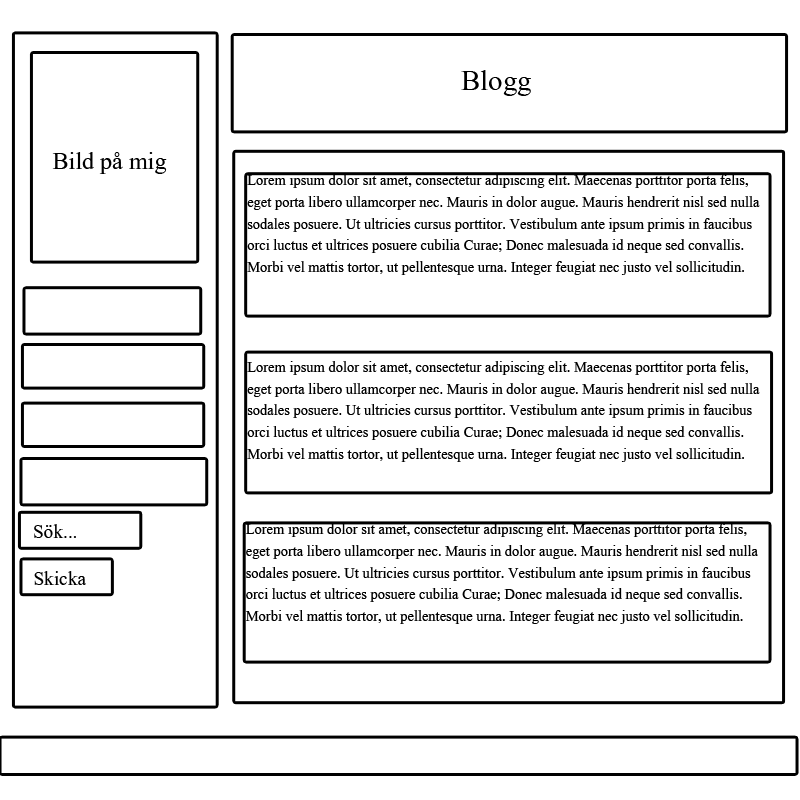
<style>
.page{position:relative;width:800px;height:800px;background:#ffffff}
.page>*{position:absolute;margin:0}
.t1{font:36px "Aparajita";color:#000000}
.t2{font:30px "Aparajita";color:#000000}
.t3{font:18px "Aparajita";color:#000000}
.t4{font:24px "Aparajita";color:#000000}
</style>
<div class="page">
<p class="t1" style="left:461px;top:70px;width:70px;height:26px">Blogg</p>
<p class="t2" style="left:52px;top:152px;width:115px;height:22px">Bild på mig</p>
<p class="t3" style="left:247px;top:174px;width:513px;height:101px">Lorem ipsum dolor sit amet, consectetur adipiscing elit. Maecenas porttitor porta felis, eget porta libero ullamcorper nec. Mauris in dolor augue. Mauris hendrerit nisl sed nulla sodales posuere. Ut ultricies cursus porttitor. Vestibulum ante ipsum primis in faucibus orci luctus et ultrices posuere cubilia Curae; Donec malesuada id neque sed convallis. Morbi vel mattis tortor, ut pellentesque urna. Integer feugiat nec justo vel sollicitudin.</p>
<p class="t3" style="left:247px;top:361px;width:513px;height:101px">Lorem ipsum dolor sit amet, consectetur adipiscing elit. Maecenas porttitor porta felis, eget porta libero ullamcorper nec. Mauris in dolor augue. Mauris hendrerit nisl sed nulla sodales posuere. Ut ultricies cursus porttitor. Vestibulum ante ipsum primis in faucibus orci luctus et ultrices posuere cubilia Curae; Donec malesuada id neque sed convallis. Morbi vel mattis tortor, ut pellentesque urna. Integer feugiat nec justo vel sollicitudin.</p>
<p class="t4" style="left:34px;top:524px;width:42px;height:14px">Sök...</p>
<p class="t3" style="left:245px;top:523px;width:513px;height:101px">Lorem ipsum dolor sit amet, consectetur adipiscing elit. Maecenas porttitor porta felis, eget porta libero ullamcorper nec. Mauris in dolor augue. Mauris hendrerit nisl sed nulla sodales posuere. Ut ultricies cursus porttitor. Vestibulum ante ipsum primis in faucibus orci luctus et ultrices posuere cubilia Curae; Donec malesuada id neque sed convallis. Morbi vel mattis tortor, ut pellentesque urna. Integer feugiat nec justo vel sollicitudin.</p>
<p class="t4" style="left:34px;top:571px;width:52px;height:14px">Skicka</p>
</div>
